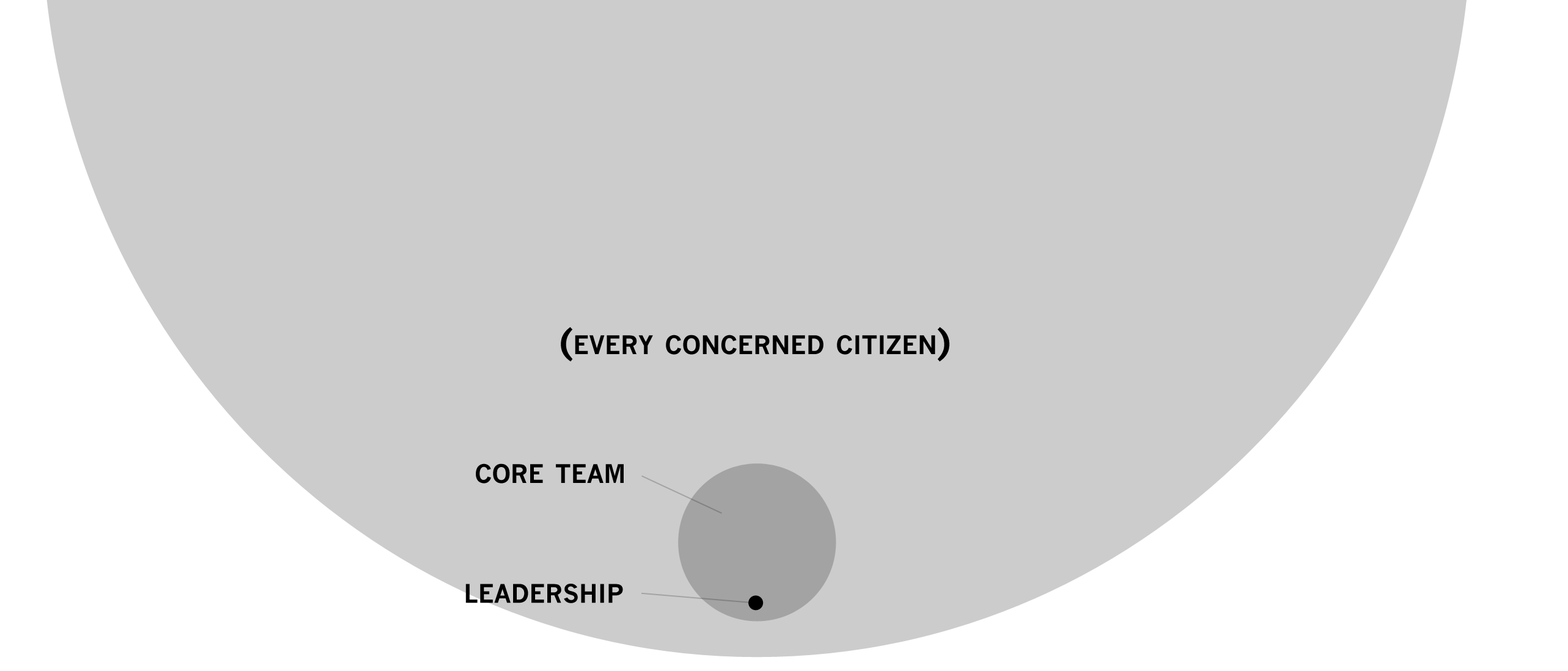
<style>
.page{position:relative;width:1568px;height:671px;background:#cccccc}
.page>*{position:absolute;margin:0}
.t1{font:35.7px "NewsGothicMT-Bold";color:#000000;font-variant:small-caps}
</style>
<div class="page">
<p class="t1" style="left:561px;top:327px;width:389px;height:35px">(every concerned citizen)</p>
<p class="t1" style="left:476px;top:464px;width:148px;height:20px">core team</p>
<p class="t1" style="left:465px;top:584px;width:158px;height:19px">leadership</p>
</div>
